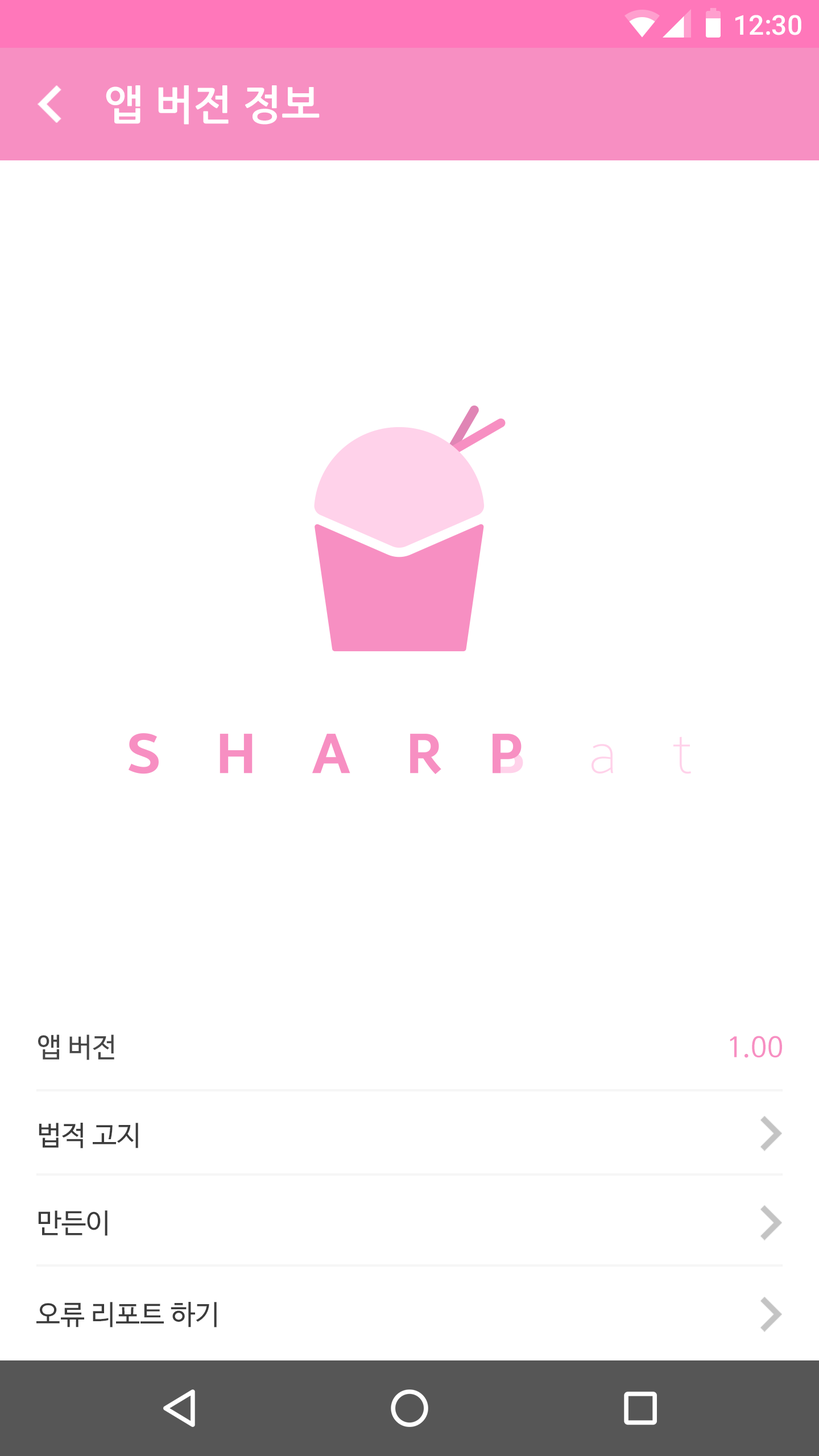
<style>
.page{position:relative;width:819px;height:1456px;background:#ffffff}
.page>*{position:absolute;margin:0}
.t1{font:27.3px "Roboto-Medium";color:#ffffff}
.t2{font:40.9px "NanumGothicBold";color:#ffffff}
.t3{font:27.5px "NanumBarunGothic";color:#464646}
.t4{font:27.5px "NanumBarunGothic";color:#f78fc2}
.t5{font:27.5px "NanumBarunGothic";color:#3b3b3b}
</style>
<div class="page">
<p class="t1" style="left:735px;top:15px;width:66px;height:20px">12:30</p>
<p class="t2" style="left:106px;top:85px;width:214px;height:40px">앱 버전 정보</p>
<p class="t3" style="left:38px;top:1035px;width:744px;height:25px">앱 버전                                                                                                   <span class="t4">1.00</span></p>
<p class="t5" style="left:39px;top:1123px;width:99px;height:25px">법적 고지</p>
<p class="t5" style="left:38px;top:1210px;width:69px;height:26px">만든이</p>
<p class="t5" style="left:36px;top:1302px;width:181px;height:25px">오류 리포트 하기</p>
</div>
